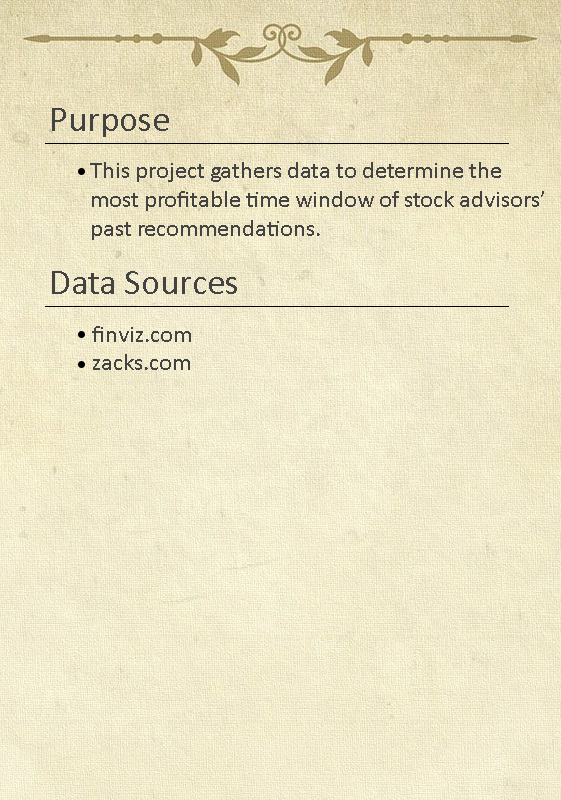
<style>
.page{position:relative;width:561px;height:800px}
.page>*{position:absolute;margin:0}
.t1{font:36px "Calibri";color:#434343}
.t2{font:24px "Calibri";color:#434343}
</style>
<div class="page">
<p class="t1" style="left:52px;top:108px;width:117px;height:29px">Purpose</p>
<p class="t2" style="left:90px;top:162px;width:454px;height:78px">This project gathers data to determine the <br>most profitable time window of stock advisors’ <br>past recommendations.</p>
<p class="t1" style="left:52px;top:271px;width:185px;height:23px">Data Sources</p>
<p class="t2" style="left:92px;top:326px;width:99px;height:44px">finviz.com<br>zacks.com</p>
</div>
